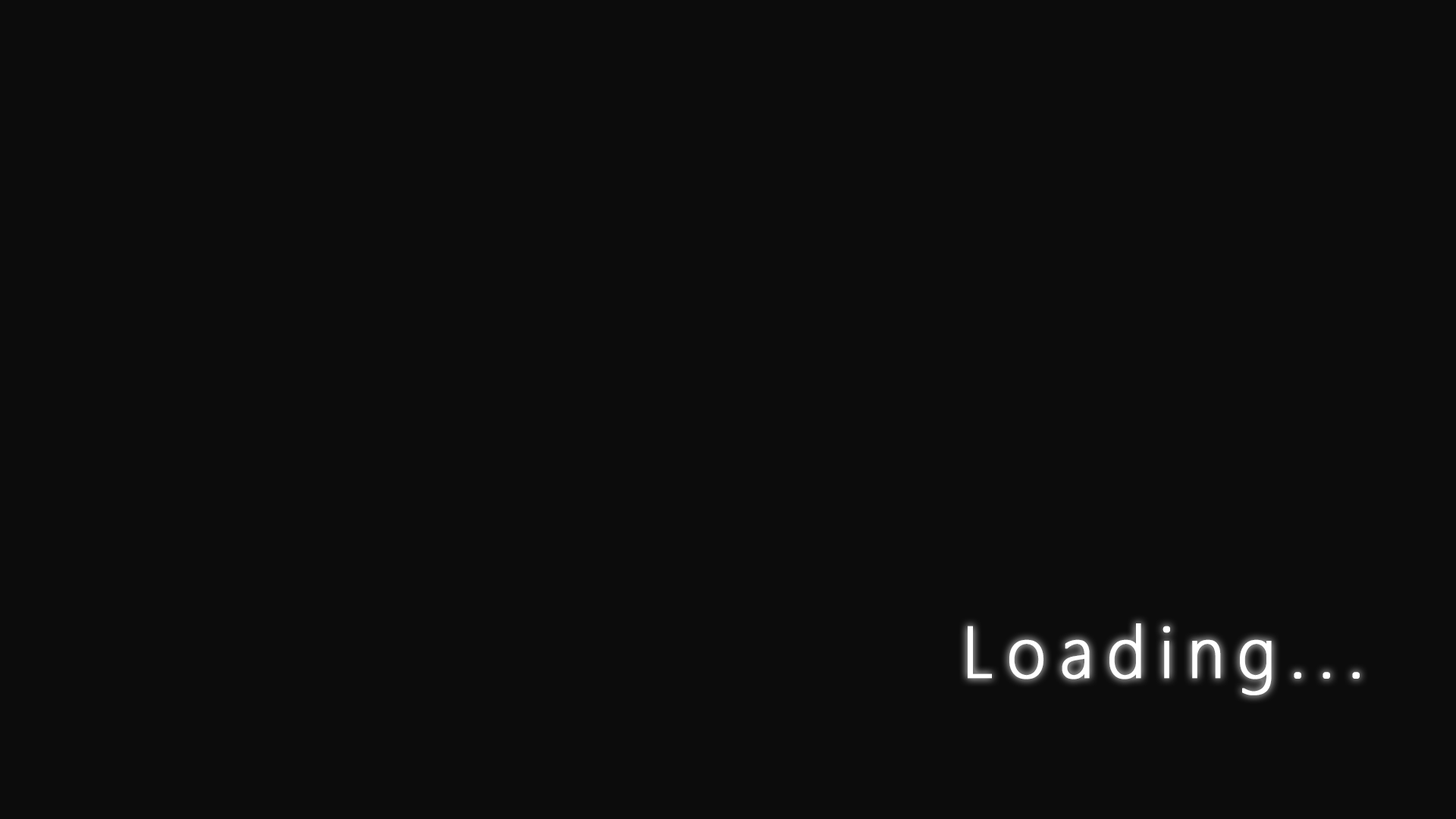
<style>
.page{position:relative;width:1456px;height:819px;background:#0c0c0c}
.page>*{position:absolute;margin:0}
.t1{font:72.8px "SegoeUI-Light";letter-spacing:0.18em;color:#ffffff;font-weight:bold;scale:0.93 1}
</style>
<div class="page">
<p class="t1" style="left:968px;top:623px;width:392px;height:72px">Loading...</p>
</div>
